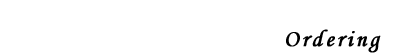
<style>
.page{position:relative;width:400px;height:55px;background:#ffffff}
.page>*{position:absolute;margin:0}
.t1{font:24px "MonotypeCorsiva";letter-spacing:0.1em;color:#000000;font-weight:bold}
</style>
<div class="page">
<p class="t1" style="left:286px;top:29px;width:95px;height:24px">Ordering</p>
</div>
